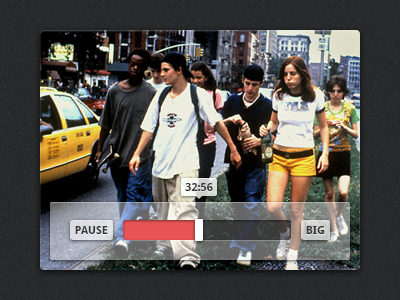
<style>
.page{position:relative;width:400px;height:300px}
.page>*{position:absolute;margin:0}
.t1{font:11px "DroidSans-Bold";color:#383838}
</style>
<div class="page">
<p class="t1" style="left:185px;top:183px;width:28px;height:8px">32:56</p>
<p class="t1" style="left:75px;top:226px;width:33px;height:8px">PAUSE</p>
<p class="t1" style="left:306px;top:226px;width:19px;height:8px">BIG</p>
</div>
